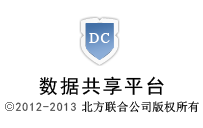
<style>
.page{position:relative;width:203px;height:128px;background:#ffffff}
.page>*{position:absolute;margin:0}
.t1{font:13.8px "Vani";letter-spacing:0.1em;color:#ffffff}
.t2{font:19.8px "SimHei";letter-spacing:0.08em;color:#000000}
.t3{font:11.9px "SimHei";letter-spacing:0.08em;color:#4c4c4c}
.t4{font:11.9px "SimSun"}
</style>
<div class="page">
<p class="t1" style="left:89px;top:33px;width:21px;height:10px">DC</p>
<p class="t2" style="left:39px;top:76px;width:125px;height:19px">数据共享平台</p>
<p class="t3" style="left:15px;top:102px;width:61px;height:9px">2012-2013</p>
<p class="t4" style="left:82px;top:101px;width:117px;height:12px">北方联合公司版权所有</p>
</div>
